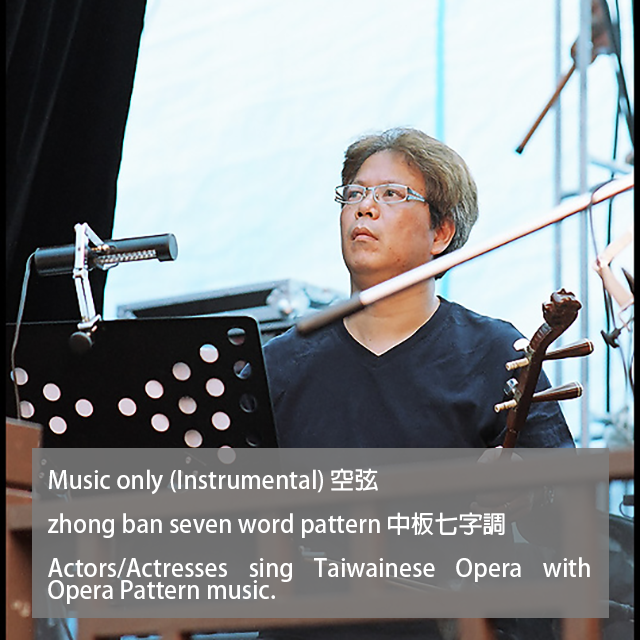
<style>
.page{position:relative;width:640px;height:640px}
.page>*{position:absolute;margin:0}
.t1{font:24px/22px "AdobeFanHeitiStd-Bold";color:#ffffff}
</style>
<div class="page">
<p class="t1" style="left:48px;top:468px;width:542px;height:136px;text-align:justify">Music only (Instrumental) 空弦<br><br>zhong ban seven word pattern 中板七字調<br><br>Actors/Actresses sing Taiwainese Opera with Opera Pattern music.</p>
</div>
